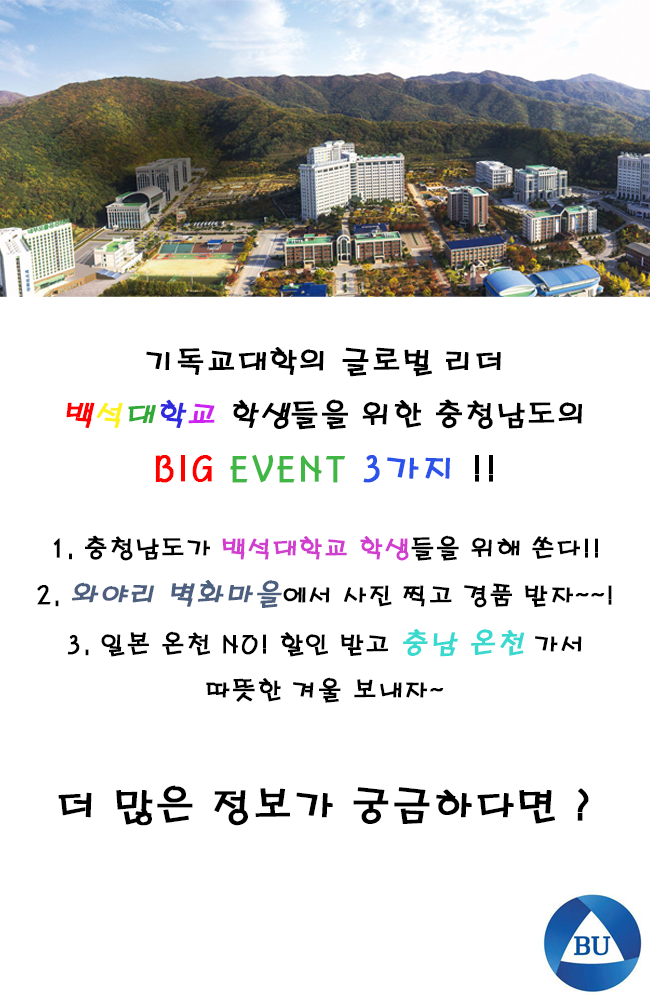
<style>
.page{position:relative;width:650px;height:1000px;background:#ffffff}
.page>*{position:absolute;margin:0}
.t1{font:30px "H2porM";color:#000000;font-weight:bold}
.t2{font:30px "H2porM";color:#ff0000;font-weight:bold;font-style:italic}
.t3{font:30px "H2porM";color:#fef120;font-weight:bold;font-style:italic}
.t4{font:30px "H2porM";color:#30a936;font-weight:bold;font-style:italic}
.t5{font:30px "H2porM";color:#2f2add;font-weight:bold;font-style:italic}
.t6{font:30px "H2porM";color:#cd23f1;font-weight:bold;font-style:italic}
.t7{font:30px "H2porM";color:#000000;font-weight:bold;font-style:italic}
.t8{font:35px "H2porM";color:#ff0000;font-weight:bold}
.t9{font:35px "H2porM";color:#40b745;font-weight:bold}
.t10{font:35px "H2porM";color:#2b53e9;font-weight:bold}
.t11{font:35px "H2porM";color:#000000;font-weight:bold}
.t12{font:25px "H2porM";color:#000000;font-weight:bold}
.t13{font:25px "H2porM";color:#d13ecf;font-weight:bold}
.t14{font:28px "H2porM";color:#4d5f7e;font-weight:bold;font-style:italic}
.t15{font:28px "H2porM";color:#3ad9d0;font-weight:bold;font-style:italic}
.t16{font:40.5px "H2porM";color:#000000;font-weight:bold}
</style>
<div class="page">
<p class="t1" style="left:66px;top:347px;width:516px;height:136px;text-align:center">기독교대학의 글로벌 리더<br><span class="t2">백</span><span class="t3">석</span><span class="t4">대</span><span class="t5">학</span><span class="t6">교</span><span class="t7"> 학생</span>들을 위한 충청남도의<br><span class="t8">BIG </span><span class="t9">EVENT </span><span class="t10">3가지</span><span class="t11"> !!</span></p>
<p class="t12" style="left:37px;top:535px;width:575px;height:168px;text-align:center">1. 충청남도가 <span class="t13">백석대학교 학생</span>들을 위해 쏜다!!<br>2. <span class="t14">와야리 벽화마을</span>에서 사진 찍고 경품 받자~~!<br>3. 일본 온천 NO! 할인 받고 <span class="t15">충남 온천 </span>가서 따뜻한 겨울 보내자~</p>
<p class="t16" style="left:58px;top:785px;width:531px;height:41px">더 많은 정보가 궁금하다면 ?</p>
</div>
